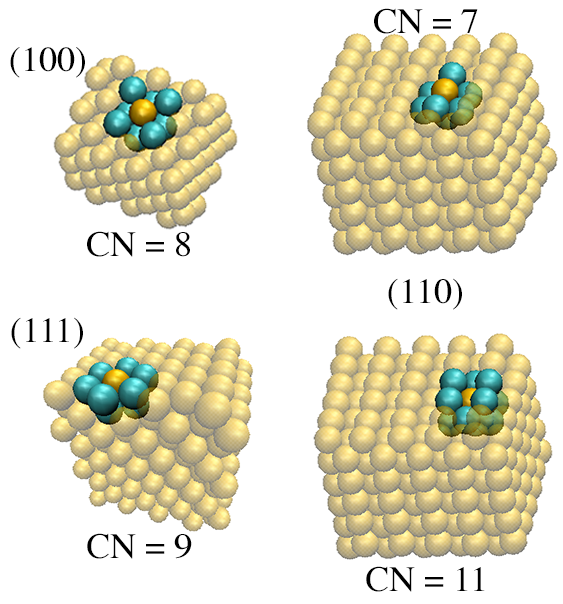
<style>
.page{position:relative;width:563px;height:604px;background:#ffffff}
.page>*{position:absolute;margin:0}
.t1{font:35.7px "Times-Roman";color:#000000}
.t2{font:36px "Times-Roman";color:#000000}
</style>
<div class="page">
<p class="t1" style="left:374px;top:8px;width:104px;height:26px">CN = 7</p>
<p class="t1" style="left:10px;top:47px;width:75px;height:31px">(100)</p>
<p class="t1" style="left:87px;top:231px;width:103px;height:26px">CN = 8</p>
<p class="t2" style="left:388px;top:278px;width:74px;height:32px">(110)</p>
<p class="t1" style="left:11px;top:317px;width:72px;height:32px">(111)</p>
<p class="t2" style="left:87px;top:533px;width:105px;height:26px">CN = 9</p>
<p class="t2" style="left:366px;top:566px;width:119px;height:26px">CN = 11</p>
</div>
